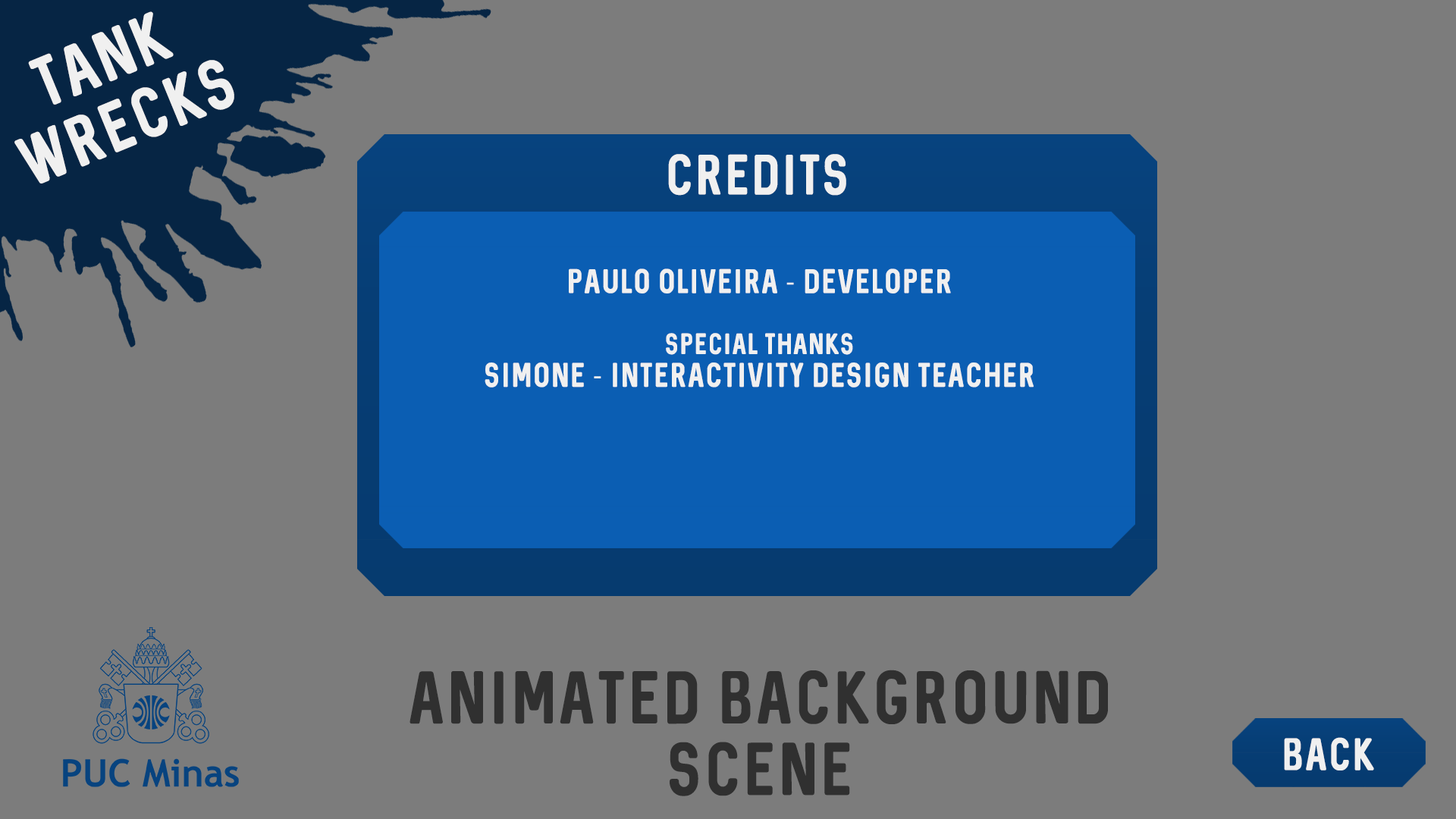
<style>
.page{position:relative;width:1456px;height:819px;background:#7c7c7c}
.page>*{position:absolute;margin:0}
.t1{font:56.6px "Sequel-Regular";letter-spacing:0.075em;color:#f0f0f0;text-transform:uppercase;scale:0.95 1}
.t2{font:45.5px "Sequel-Regular";letter-spacing:0.075em;color:#f0f0f0;text-transform:uppercase;scale:0.95 1}
.t3{font:27.3px "Sequel-Regular";letter-spacing:0.075em;color:#f0f0f0;text-transform:uppercase;scale:0.95 1}
.t4{font:27.3px "MyriadPro-Regular";letter-spacing:0.075em;color:#f0f0f0;text-transform:uppercase;scale:0.95 1}
.t5{font:23.5px "Sequel-Regular";letter-spacing:0.075em;color:#f0f0f0;text-transform:uppercase;scale:0.95 1}
.t6{font:59.7px "Sequel-Regular";letter-spacing:0.075em;color:#303030;text-transform:uppercase;scale:0.95 1}
.t7{font:36.4px "Sequel-Regular";letter-spacing:0.075em;color:#f0f0f0;text-transform:uppercase;scale:0.95 1}
</style>
<div class="page">
<p class="t1" style="left:14px;top:11px;width:220px;height:173px;text-align:center;rotate:-22deg">Tank<br>Wrecks</p>
<p class="t2" style="left:668px;top:154px;width:178px;height:42px">credits</p>
<p class="t3" style="left:485px;top:268px;width:549px;height:120px;text-align:center">paulo oliveira <span class="t4">- </span>developer<br><br><span class="t5">special thanks<br></span>simone <span class="t4">- </span>interactivity design teacher</p>
<p class="t6" style="left:409px;top:670px;width:699px;height:126px;text-align:center">animated background<br>scene</p>
<p class="t7" style="left:1284px;top:737px;width:90px;height:33px">back</p>
</div>
